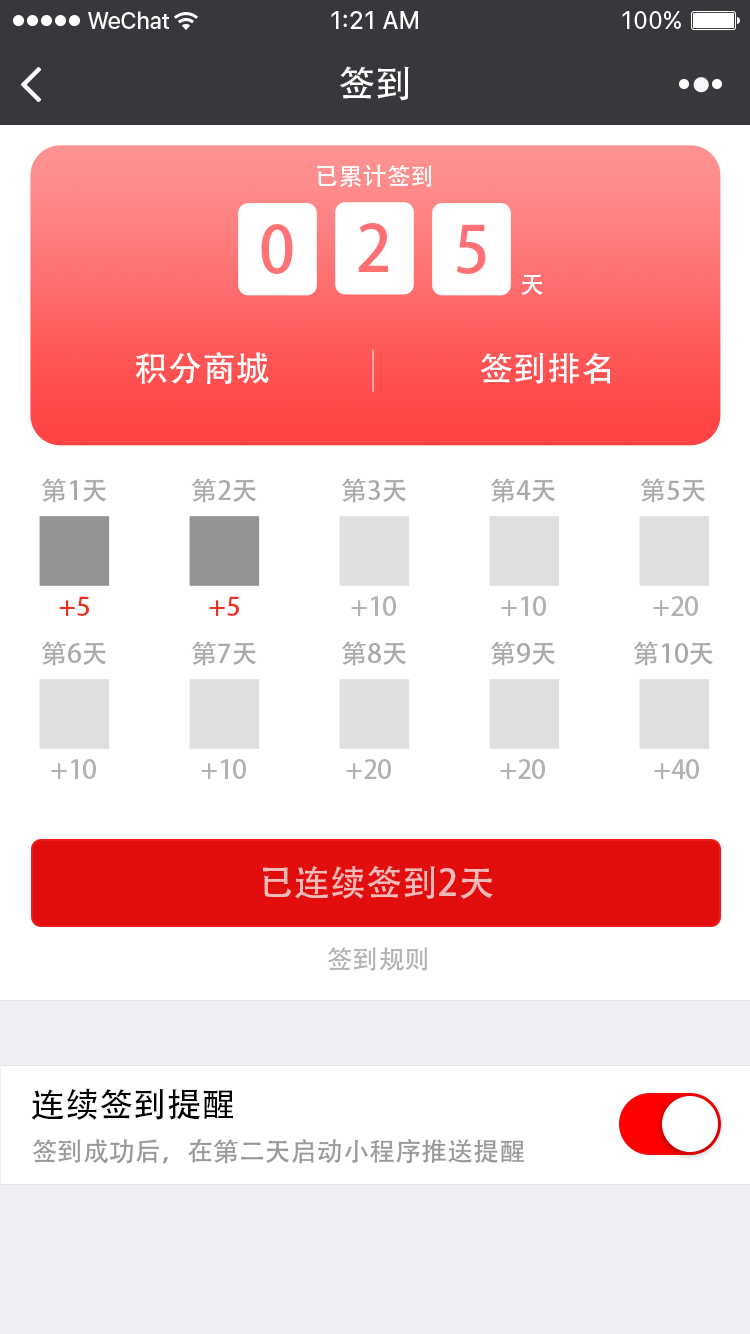
<style>
.page{position:relative;width:750px;height:1334px;background:#ffffff}
.page>*{position:absolute;margin:0}
.t1{font:37px "AdobeHeitiStd-Regular";color:#ffffff}
.t2{font:24px "AdobeHeitiStd-Regular";color:#ffffff}
.t3{font:64px "AdobeHeitiStd-Regular";color:#ff7275}
.t4{font:64px "AdobeHeitiStd-Regular";color:#ff7072}
.t5{font:64px "AdobeHeitiStd-Regular";color:#ff7174}
.t6{font:34px "AdobeHeitiStd-Regular";color:#ffffff}
.t7{font:26px "AdobeHeitiStd-Regular";color:#a9a9a9}
.t8{font:26px "AdobeHeitiStd-Regular";color:#f12c20}
.t9{font:26px "AdobeHeitiStd-Regular";color:#b2b2b2}
.t10{font:36px "AdobeHeitiStd-Regular";color:#f4b9b9}
.t11{font:34px "AdobeHeitiStd-Regular";color:#000000}
.t12{font:26px "AdobeHeitiStd-Regular";color:#999999}
</style>
<div class="page">
<p class="t1" style="left:339px;top:66px;width:70px;height:35px">签到</p>
<p class="t2" style="left:317px;top:164px;width:115px;height:23px">已累计签到</p>
<p class="t3" style="left:261px;top:224px;width:32px;height:50px">0</p>
<p class="t4" style="left:358px;top:223px;width:30px;height:49px">2</p>
<p class="t5" style="left:456px;top:224px;width:30px;height:50px">5</p>
<p class="t2" style="left:521px;top:274px;width:22px;height:21px">天</p>
<p class="t6" style="left:136px;top:352px;width:133px;height:32px">积分商城</p>
<p class="t6" style="left:480px;top:353px;width:131px;height:31px">签到排名</p>
<p class="t7" style="left:41px;top:478px;width:66px;height:25px">第1天</p>
<p class="t7" style="left:191px;top:478px;width:66px;height:25px">第2天</p>
<p class="t7" style="left:341px;top:478px;width:66px;height:25px">第3天</p>
<p class="t7" style="left:490px;top:478px;width:66px;height:25px">第4天</p>
<p class="t7" style="left:640px;top:478px;width:66px;height:25px">第5天</p>
<p class="t8" style="left:59px;top:596px;width:30px;height:20px">+5</p>
<p class="t8" style="left:209px;top:596px;width:30px;height:20px">+5</p>
<p class="t9" style="left:351px;top:596px;width:45px;height:20px">+10</p>
<p class="t9" style="left:501px;top:596px;width:45px;height:20px">+10</p>
<p class="t9" style="left:653px;top:596px;width:45px;height:20px">+20</p>
<p class="t7" style="left:41px;top:641px;width:66px;height:25px">第6天</p>
<p class="t7" style="left:191px;top:641px;width:66px;height:25px">第7天</p>
<p class="t7" style="left:341px;top:641px;width:66px;height:25px">第8天</p>
<p class="t7" style="left:490px;top:641px;width:66px;height:25px">第9天</p>
<p class="t7" style="left:633px;top:641px;width:80px;height:25px">第10天</p>
<p class="t9" style="left:51px;top:759px;width:45px;height:20px">+10</p>
<p class="t9" style="left:201px;top:759px;width:45px;height:20px">+10</p>
<p class="t9" style="left:346px;top:759px;width:45px;height:20px">+20</p>
<p class="t9" style="left:500px;top:759px;width:45px;height:20px">+20</p>
<p class="t9" style="left:654px;top:759px;width:45px;height:20px">+40</p>
<p class="t10" style="left:262px;top:866px;width:230px;height:33px">已连续签到2天</p>
<p class="t10" style="left:263px;top:866px;width:230px;height:33px">已连续签到2天</p>
<p class="t9" style="left:327px;top:947px;width:101px;height:24px">签到规则</p>
<p class="t11" style="left:31px;top:1088px;width:202px;height:32px">连续签到提醒</p>
<p class="t12" style="left:32px;top:1138px;width:492px;height:26px">签到成功后，在第二天启动小程序推送提醒</p>
</div>
